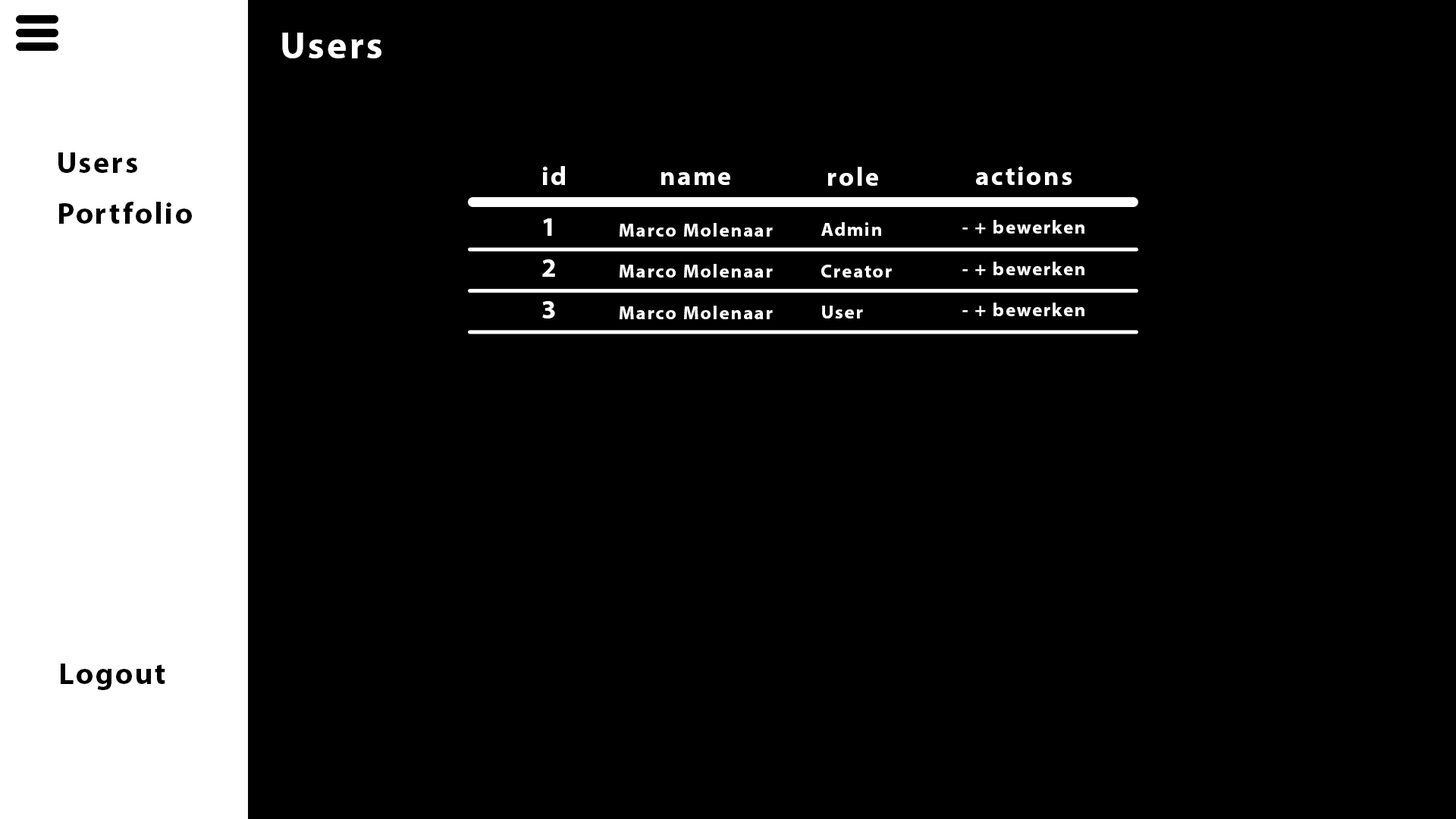
<style>
.page{position:relative;width:1456px;height:819px;background:#000000}
.page>*{position:absolute;margin:0}
.t1{font:37.9px "MyriadPro-Bold";letter-spacing:0.075em;color:#ffffff}
.t2{font:30.3px "MyriadPro-Bold";letter-spacing:0.075em;color:#000000}
.t3{font:26.5px "MyriadPro-Bold";letter-spacing:0.075em;color:#ffffff}
.t4{font:19px "MyriadPro-Bold";letter-spacing:0.075em;color:#ffffff}
</style>
<div class="page">
<p class="t1" style="left:282px;top:33px;width:99px;height:25px">Users</p>
<p class="t2" style="left:58px;top:152px;width:79px;height:21px">Users</p>
<p class="t3" style="left:543px;top:166px;width:22px;height:19px">id</p>
<p class="t3" style="left:661px;top:172px;width:69px;height:13px">name</p>
<p class="t3" style="left:828px;top:167px;width:50px;height:19px">role</p>
<p class="t3" style="left:976px;top:166px;width:96px;height:19px">actions</p>
<p class="t2" style="left:59px;top:202px;width:133px;height:22px">Portfolio</p>
<p class="t3" style="left:543px;top:218px;width:9px;height:18px">1</p>
<p class="t4" style="left:962px;top:220px;width:122px;height:14px">- + bewerken</p>
<p class="t4" style="left:620px;top:223px;width:153px;height:14px">Marco Molenaar</p>
<p class="t4" style="left:821px;top:222px;width:60px;height:14px">Admin</p>
<p class="t3" style="left:542px;top:259px;width:13px;height:18px">2</p>
<p class="t4" style="left:620px;top:264px;width:153px;height:14px">Marco Molenaar</p>
<p class="t4" style="left:821px;top:265px;width:71px;height:13px">Creator</p>
<p class="t4" style="left:962px;top:262px;width:122px;height:13px">- + bewerken</p>
<p class="t3" style="left:542px;top:301px;width:13px;height:17px">3</p>
<p class="t4" style="left:620px;top:306px;width:153px;height:13px">Marco Molenaar</p>
<p class="t4" style="left:822px;top:306px;width:41px;height:12px">User</p>
<p class="t4" style="left:962px;top:303px;width:122px;height:13px">- + bewerken</p>
<p class="t2" style="left:61px;top:664px;width:104px;height:26px">Logout</p>
</div>
